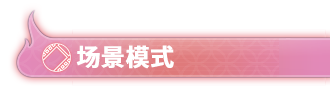
<style>
.page{position:relative;width:330px;height:90px;background:#ffffff}
.page>*{position:absolute;margin:0}
.t1{font:24px "SourceHanSansSC-Bold";color:#ffffff;font-weight:bold}
</style>
<div class="page">
<p class="t1" style="left:76px;top:45px;width:98px;height:24px">场景模式</p>
</div>
